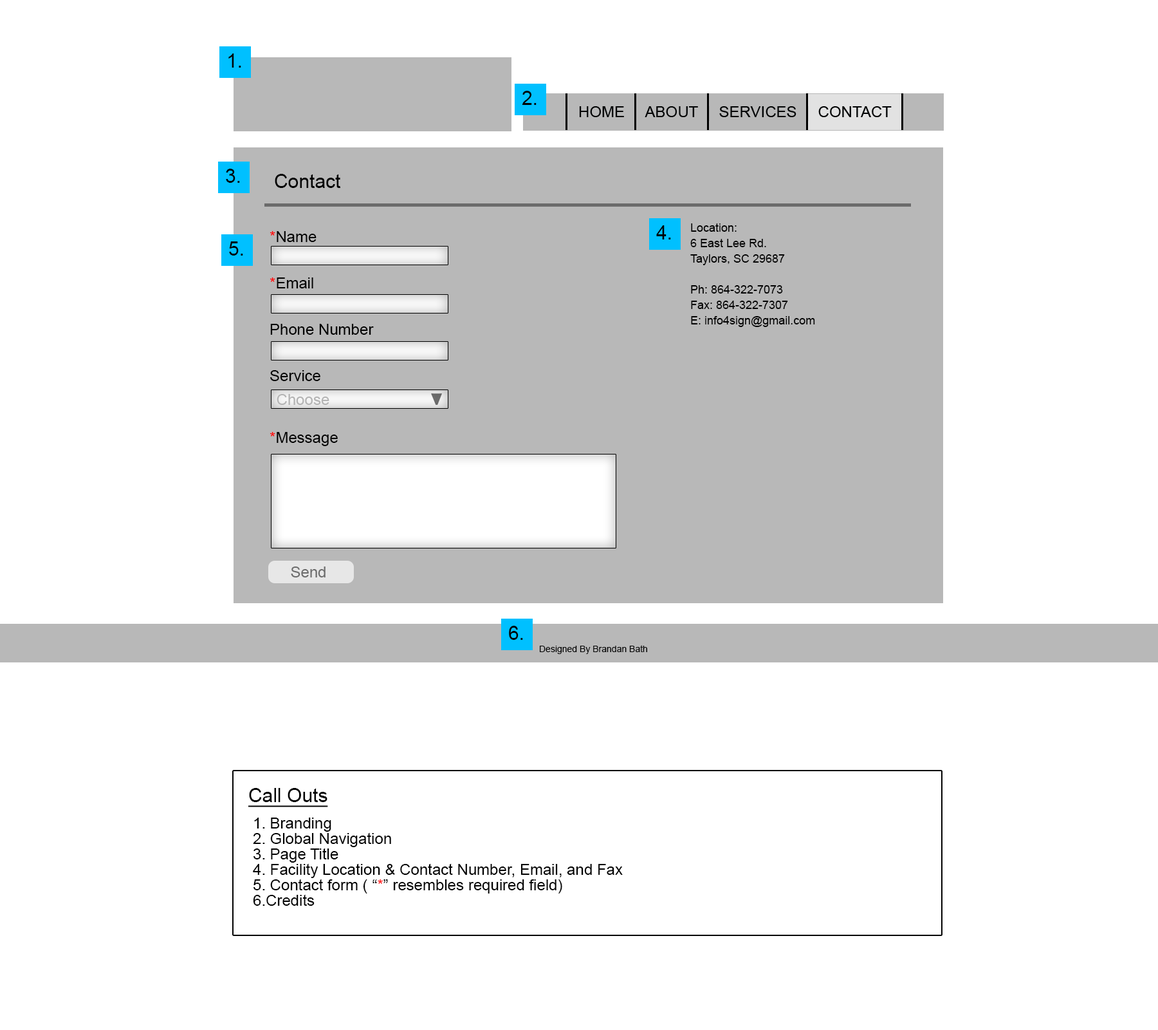
<style>
.page{position:relative;width:1158px;height:1030px;background:#ffffff}
.page>*{position:absolute;margin:0}
.t1{font:19.3px "ArialMT";color:#000203}
.t2{font:19.3px "ArialMT";color:#000000}
.t3{font:15.4px/15.4px "ArialMT";color:#000000}
.t4{font:15.4px/15.4px "ArialMT";color:#ff0000}
.t5{font:11.6px/15.4px "ArialMT";color:#000000}
.t6{font:15.4px "ArialMT";color:#b4b4b4}
.t7{font:15.4px "ArialMT";color:#6c6c6c}
.t8{font:9px "ArialMT";color:#000000}
.t9{font:19.3px "ArialMT";color:#000000;text-decoration:underline}
</style>
<div class="page">
<p class="t1" style="left:228px;top:53px;width:13px;height:15px">1.</p>
<p class="t1" style="left:522px;top:91px;width:15px;height:14px">2.</p>
<p class="t1" style="left:226px;top:169px;width:14px;height:14px">3.</p>
<p class="t2" style="left:275px;top:174px;width:65px;height:14px">Contact</p>
<p class="t3" style="left:270px;top:231px;width:104px;height:215px"><span class="t4">*</span>Name<br><br><br><span class="t4">*</span>Email<br><br><br>Phone Number<br><br><br>Service<br><br><br><br><span class="t4">*</span>Message</p>
<p class="t1" style="left:656px;top:225px;width:15px;height:14px">4.</p>
<p class="t5" style="left:690px;top:223px;width:125px;height:104px">Location:<br>6 East Lee Rd.<br>Taylors, SC 29687<br><br>Ph: 864-322-7073<br>Fax: 864-322-7307<br>E: info4sign@gmail.com</p>
<p class="t1" style="left:229px;top:241px;width:14px;height:14px">5.</p>
<p class="t6" style="left:277px;top:394px;width:52px;height:11px">Choose</p>
<p class="t7" style="left:291px;top:566px;width:35px;height:11px">Send</p>
<p class="t1" style="left:509px;top:625px;width:14px;height:15px">6.</p>
<p class="t8" style="left:540px;top:645px;width:107px;height:9px">Designed By Brandan Bath</p>
<p class="t9" style="left:248px;top:788px;width:80px;height:19px">Call Outs</p>
<p class="t3" style="left:253px;top:817px;width:370px;height:88px">1. Branding<br>2. Global Navigation<br>3. Page Title<br>4. Facility Location &amp; Contact Number, Email, and Fax<br>5. Contact form ( “<span class="t4">*</span>” resembles required field)<br>6.Credits</p>
</div>
